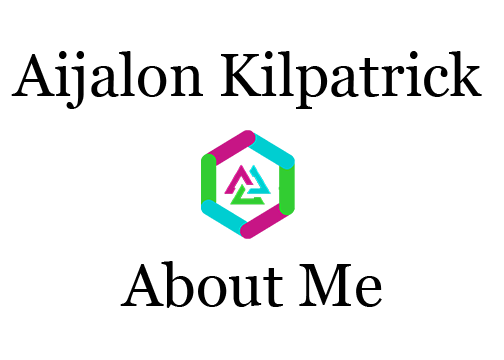
<style>
.page{position:relative;width:504px;height:360px;background:#ffffff}
.page>*{position:absolute;margin:0}
.t1{font:60px "Georgia";color:#000000}
</style>
<div class="page">
<p class="t1" style="left:11px;top:51px;width:471px;height:58px">Aijalon Kilpatrick</p>
<p class="t1" style="left:120px;top:261px;width:262px;height:47px">About Me</p>
</div>
